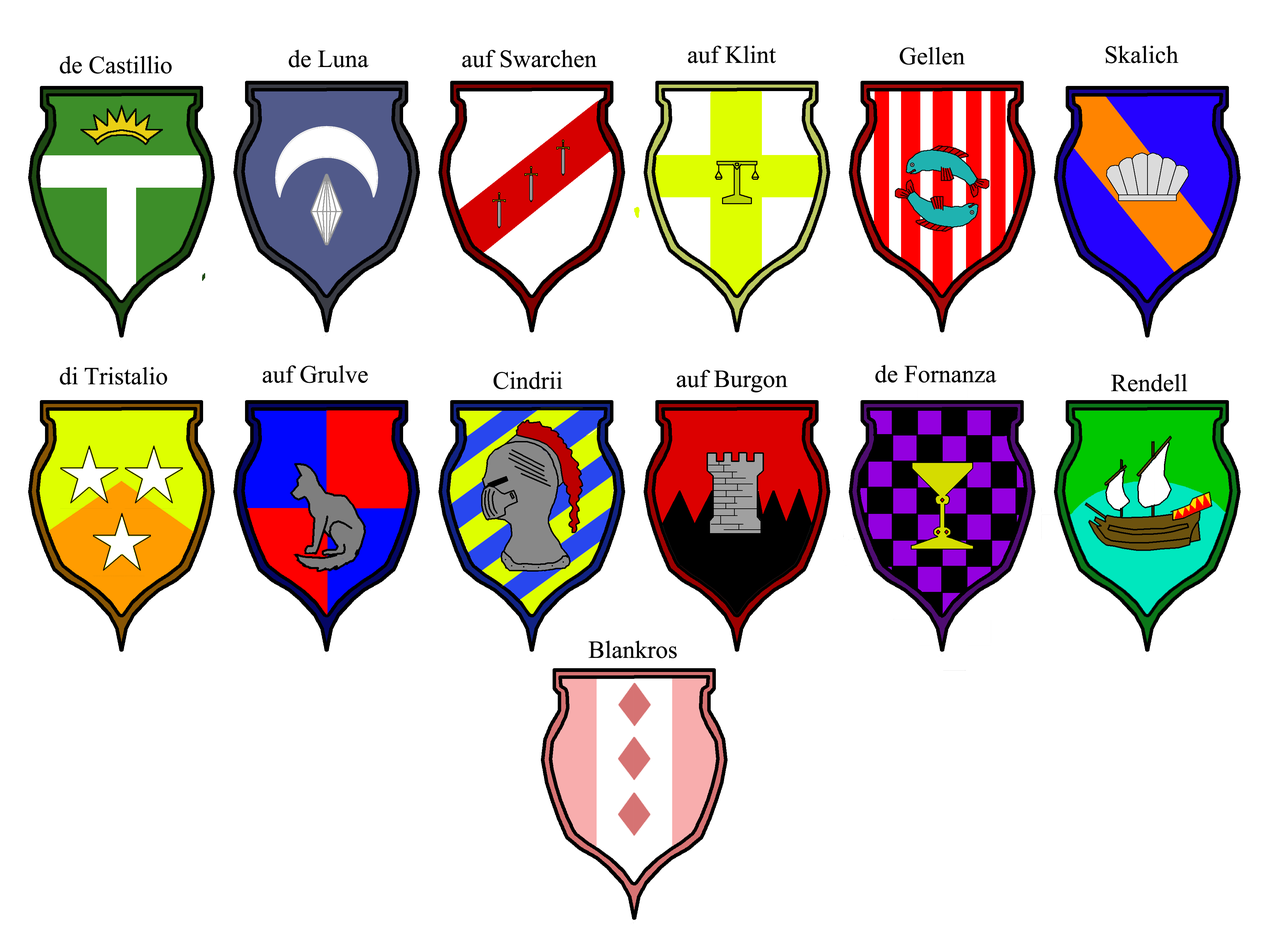
<style>
.page{position:relative;width:1287px;height:926px;background:#ffffff}
.page>*{position:absolute;margin:0}
.t1{font:24.8px "MongolianBaiti";color:#000000}
</style>
<div class="page">
<p class="t1" style="left:289px;top:50px;width:80px;height:17px">de Luna</p>
<p class="t1" style="left:462px;top:50px;width:135px;height:18px">auf Swarchen</p>
<p class="t1" style="left:688px;top:45px;width:88px;height:18px">auf Klint</p>
<p class="t1" style="left:900px;top:47px;width:65px;height:18px">Gellen</p>
<p class="t1" style="left:1106px;top:45px;width:73px;height:19px">Skalich</p>
<p class="t1" style="left:60px;top:56px;width:112px;height:18px">de Castillio</p>
<p class="t1" style="left:263px;top:365px;width:105px;height:18px">auf Grulve</p>
<p class="t1" style="left:876px;top:365px;width:121px;height:18px">de Fornanza</p>
<p class="t1" style="left:60px;top:367px;width:107px;height:18px">di Tristalio</p>
<p class="t1" style="left:494px;top:371px;width:68px;height:19px">Cindrii</p>
<p class="t1" style="left:677px;top:370px;width:111px;height:23px">auf Burgon</p>
<p class="t1" style="left:1111px;top:374px;width:77px;height:18px">Rendell</p>
<p class="t1" style="left:589px;top:640px;width:88px;height:18px">Blankros</p>
</div>
